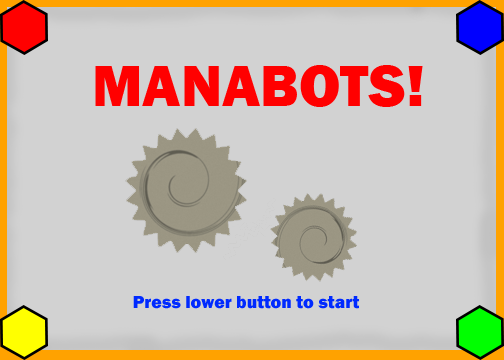
<style>
.page{position:relative;width:504px;height:360px;background:#d2d2d2}
.page>*{position:absolute;margin:0}
.t1{font:60px "FranklinGothic-Heavy";color:#ff0000}
.t2{font:18px "FranklinGothic-Heavy";color:#002aff}
</style>
<div class="page">
<p class="t1" style="left:95px;top:65px;width:328px;height:42px">MANABOTS!</p>
<p class="t2" style="left:133px;top:296px;width:226px;height:13px">Press lower button to start</p>
</div>
